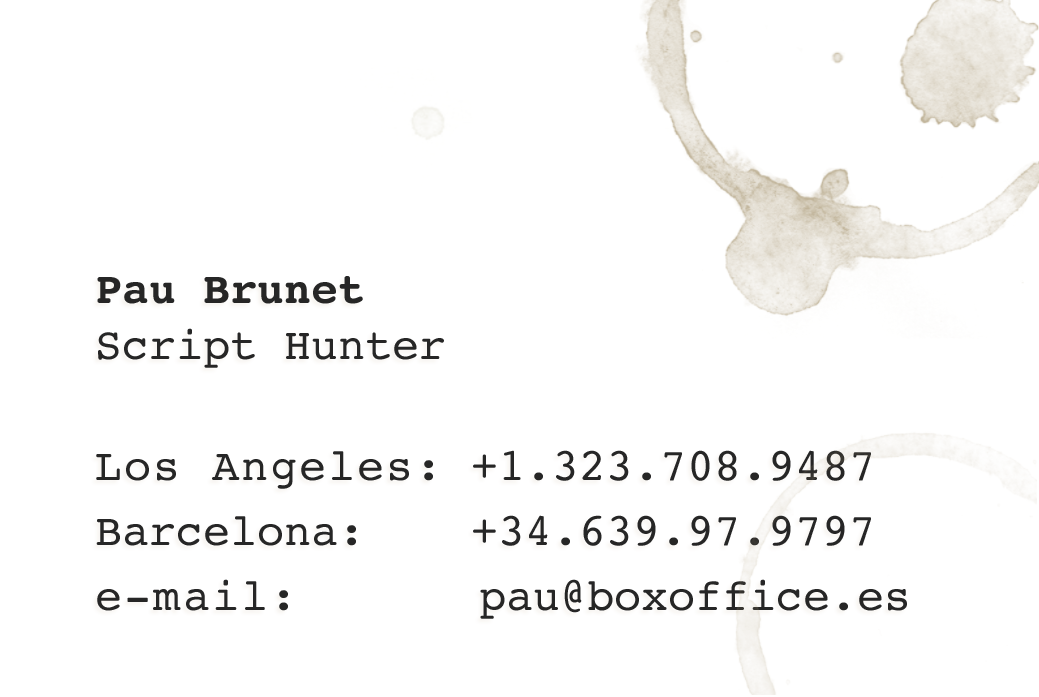
<style>
.page{position:relative;width:1039px;height:697px;background:#ffffff}
.page>*{position:absolute;margin:0}
.t1{font:45px/62.5px "Courier";color:#262626}
.t2{font:45px "Courier-Bold";color:#262626}
.t3{font:45px "Courier";color:#262626}
.t4{font:45px/62.5px "Courier";letter-spacing:0.045em;color:#262626}
</style>
<div class="page">
<p class="t1" style="left:96px;top:276px;width:811px;height:343px"><span class="t2">Pau Brunet<br></span><span class="t3">Script Hunter<br><br></span><span class="t4">Los Angeles:</span> +1.323.708.9487<br>Barcelona:    +34.639.97.9797 <br><span class="t4">e-mail:      </span> pau@boxoffice.es</p>
</div>
